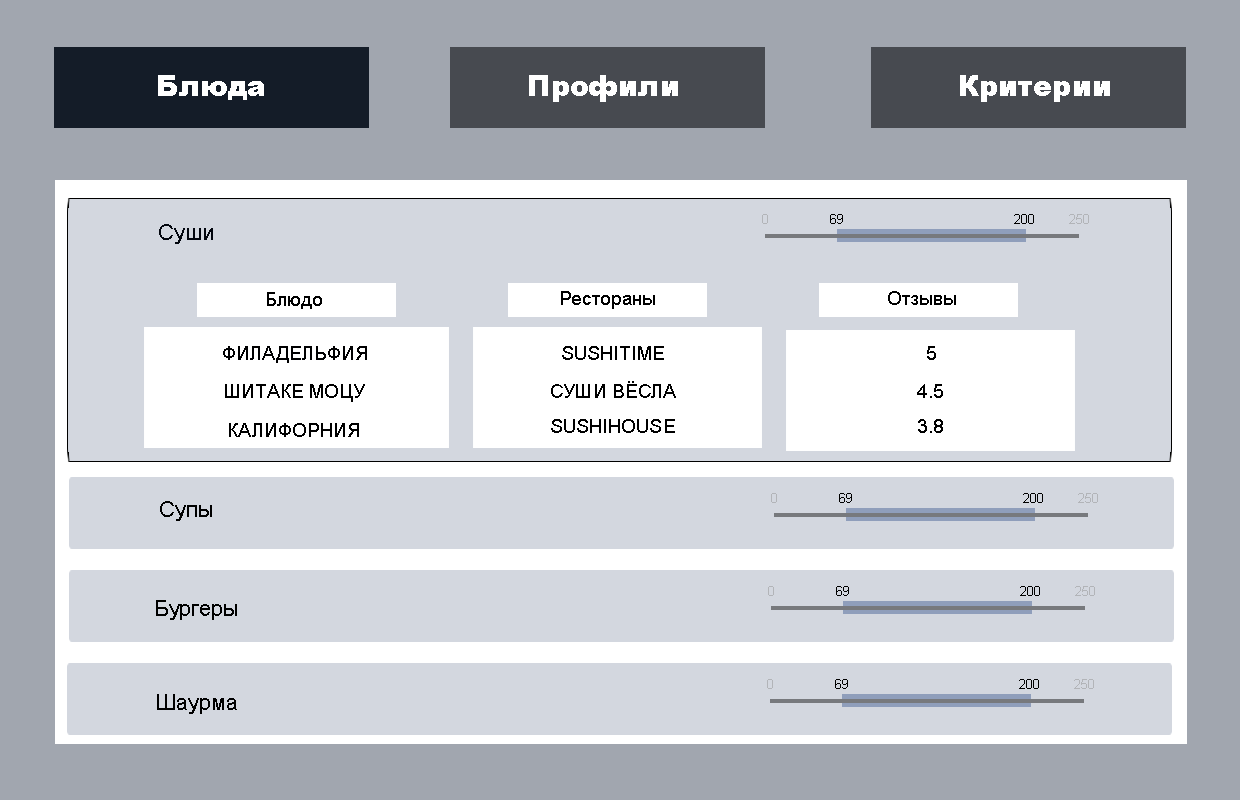
<style>
.page{position:relative;width:1240px;height:800px;background:#d3d7df}
.page>*{position:absolute;margin:0}
.t1{font:28.8px "Arial-Black";letter-spacing:0.003em;color:#ffffff}
.t2{font:13.2px "ArialMT";letter-spacing:0.003em;color:#b2b4b8}
.t3{font:13.2px "ArialMT";letter-spacing:0.003em;color:#000000}
.t4{font:21.6px "ArialMT";letter-spacing:0.003em;color:#02060e}
.t5{font:19.2px "ArialMT";letter-spacing:0.003em;color:#000000}
.t6{font:19.2px "ArialMT";letter-spacing:0.003em;color:#000001}
.t7{font:21.6px "ArialMT";letter-spacing:0.003em;color:#000000}
</style>
<div class="page">
<p class="t1" style="left:158px;top:75px;width:106px;height:25px">Блюда</p>
<p class="t1" style="left:529px;top:75px;width:149px;height:27px">Профили</p>
<p class="t1" style="left:960px;top:75px;width:150px;height:27px">Критерии</p>
<p class="t2" style="left:762px;top:214px;width:6px;height:10px">0</p>
<p class="t3" style="left:830px;top:214px;width:13px;height:10px">69</p>
<p class="t3" style="left:1014px;top:214px;width:20px;height:10px">200</p>
<p class="t2" style="left:1069px;top:214px;width:20px;height:10px">250</p>
<p class="t4" style="left:159px;top:224px;width:54px;height:20px">Суши</p>
<p class="t5" style="left:267px;top:292px;width:55px;height:17px">Блюдо</p>
<p class="t5" style="left:561px;top:291px;width:94px;height:18px">Рестораны</p>
<p class="t5" style="left:888px;top:291px;width:68px;height:14px">Отзывы</p>
<p class="t6" style="left:223px;top:346px;width:144px;height:17px">ФИЛАДЕЛЬФИЯ</p>
<p class="t5" style="left:562px;top:346px;width:102px;height:14px">SUSHITIME</p>
<p class="t5" style="left:927px;top:346px;width:9px;height:14px">5</p>
<p class="t5" style="left:225px;top:384px;width:140px;height:18px">ШИТАКЕ МОЦУ</p>
<p class="t5" style="left:551px;top:381px;width:125px;height:17px">СУШИ ВЁСЛА</p>
<p class="t5" style="left:917px;top:384px;width:26px;height:14px">4.5</p>
<p class="t5" style="left:229px;top:423px;width:130px;height:14px">КАЛИФОРНИЯ</p>
<p class="t5" style="left:551px;top:419px;width:124px;height:14px">SUSHIHOUSE</p>
<p class="t5" style="left:918px;top:419px;width:25px;height:14px">3.8</p>
<p class="t2" style="left:771px;top:493px;width:6px;height:10px">0</p>
<p class="t3" style="left:839px;top:493px;width:13px;height:10px">69</p>
<p class="t3" style="left:1023px;top:493px;width:20px;height:10px">200</p>
<p class="t2" style="left:1078px;top:493px;width:20px;height:10px">250</p>
<p class="t7" style="left:160px;top:501px;width:52px;height:20px">Супы</p>
<p class="t2" style="left:768px;top:586px;width:6px;height:10px">0</p>
<p class="t3" style="left:836px;top:586px;width:13px;height:10px">69</p>
<p class="t3" style="left:1020px;top:586px;width:20px;height:10px">200</p>
<p class="t2" style="left:1075px;top:586px;width:20px;height:10px">250</p>
<p class="t7" style="left:156px;top:600px;width:81px;height:20px">Бургеры</p>
<p class="t2" style="left:767px;top:679px;width:6px;height:10px">0</p>
<p class="t3" style="left:835px;top:679px;width:13px;height:10px">69</p>
<p class="t3" style="left:1019px;top:679px;width:20px;height:10px">200</p>
<p class="t2" style="left:1074px;top:679px;width:20px;height:10px">250</p>
<p class="t7" style="left:157px;top:694px;width:80px;height:20px">Шаурма</p>
</div>
